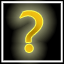
<style>
.page{position:relative;width:64px;height:64px;background:#000000}
.page>*{position:absolute;margin:0}
.t1{font:56px "-2002";color:#f8c619}
</style>
<div class="page">
<p class="t1" style="left:20px;top:11px;width:23px;height:41px">?</p>
</div>
